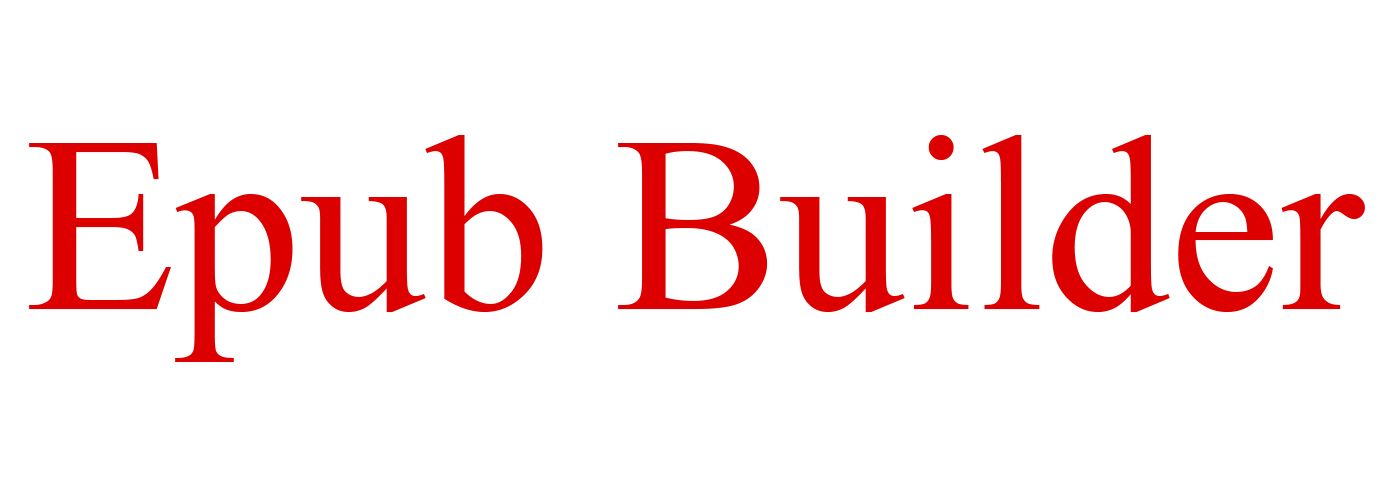
<style>
.page{position:relative;width:1400px;height:500px;background:#ffffff}
.page>*{position:absolute;margin:0}
.t1{font:250px "TimesNewRomanPSMT";color:#dc0000}
</style>
<div class="page">
<p class="t1" style="left:29px;top:135px;width:1336px;height:227px">Epub Builder</p>
</div>
